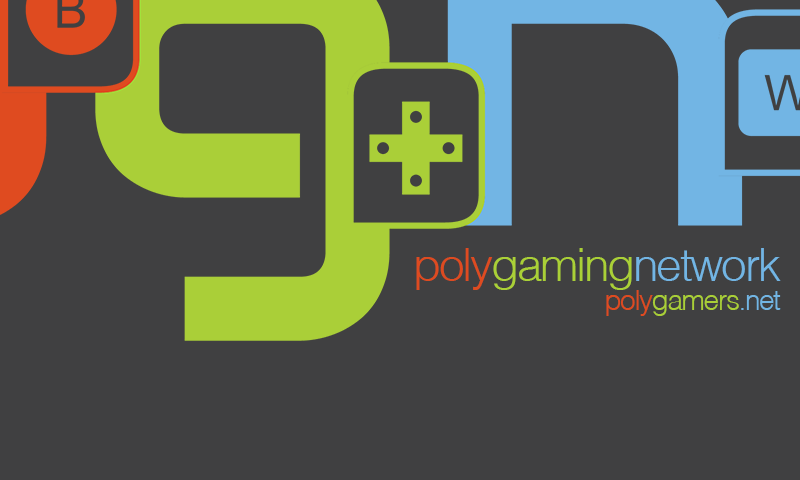
<style>
.page{position:relative;width:800px;height:480px;background:#404041}
.page>*{position:absolute;margin:0}
.t1{font:46.1px "Helvetica-Light";letter-spacing:-0.05em;color:#72b5e4}
.t2{font:46.1px "Helvetica-Light";letter-spacing:-0.05em;color:#de4b20}
.t3{font:46.1px "Helvetica-Light";letter-spacing:-0.05em;color:#aad037}
.t4{font:28px "Helvetica-Light";letter-spacing:-0.05em;color:#a9cf37}
.t5{font:28px "Helvetica-Light";letter-spacing:-0.05em;color:#de4b20}
.t6{font:28px "Helvetica-Light";letter-spacing:-0.05em;color:#72b5e3}
</style>
<div class="page">
<p class="t1" style="left:416px;top:248px;width:365px;height:42px"><span class="t2">poly</span><span class="t3">gaming</span>network</p>
<p class="t4" style="left:606px;top:290px;width:175px;height:26px"><span class="t5">poly</span>gamers<span class="t6">.net</span></p>
</div>
